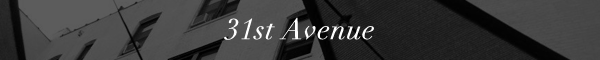
<style>
.page{position:relative;width:600px;height:60px}
.page>*{position:absolute;margin:0}
.t1{font:29px "Didot-Italic";letter-spacing:0.02em;color:#ffffff}
</style>
<div class="page">
<p class="t1" style="left:224px;top:17px;width:150px;height:23px">31st Avenue</p>
</div>
